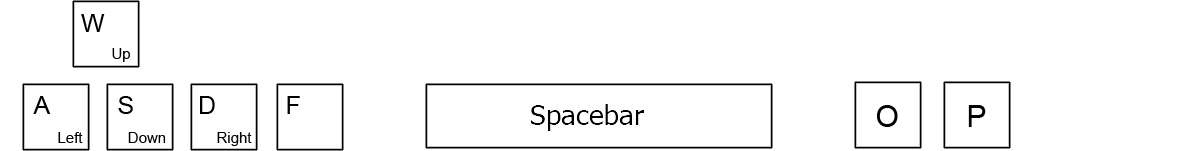
<style>
.page{position:relative;width:1200px;height:151px;background:#ffffff}
.page>*{position:absolute;margin:0}
.t1{font:25px "ArialMT";color:#000000}
.t2{font:15px "ArialMT";color:#000000}
</style>
<div class="page">
<p class="t1" style="left:81px;top:14px;width:24px;height:18px">W</p>
<p class="t2" style="left:112px;top:48px;width:18px;height:14px">Up</p>
<p class="t1" style="left:33px;top:96px;width:18px;height:18px">A</p>
<p class="t1" style="left:118px;top:96px;width:15px;height:18px">S</p>
<p class="t1" style="left:200px;top:96px;width:15px;height:18px">D</p>
<p class="t1" style="left:287px;top:96px;width:13px;height:18px">F</p>
<p class="t2" style="left:58px;top:132px;width:25px;height:11px">Left</p>
<p class="t2" style="left:128px;top:132px;width:38px;height:11px">Down</p>
<p class="t2" style="left:217px;top:132px;width:35px;height:14px">Right</p>
</div>
